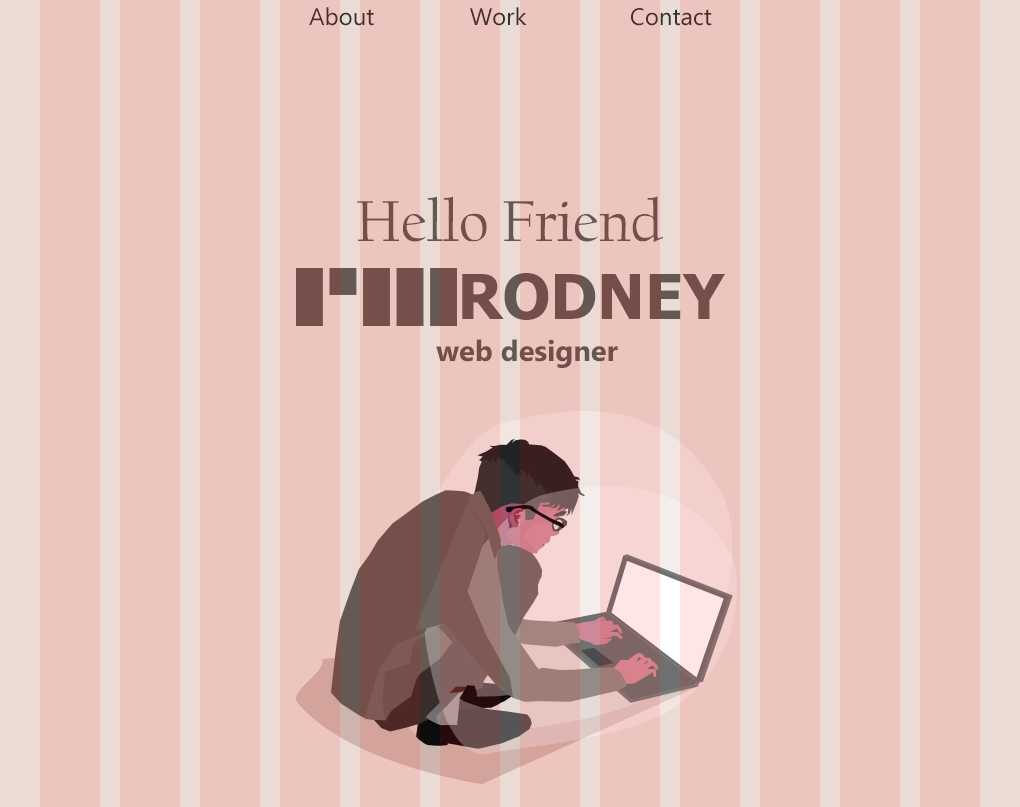
<style>
.page{position:relative;width:1020px;height:807px;background:#edc5bf}
.page>*{position:absolute;margin:0}
.t1{font:24px "Ebrima";color:#303333}
.t2{font:60px "CalifornianFB-Reg";color:#655752}
.t3{font:62px "Tahoma-Bold";color:#655752}
.t4{font:29px "Ebrima-Bold";color:#655752}
</style>
<div class="page">
<p class="t1" style="left:309px;top:7px;width:403px;height:19px">About          Work       Contact</p>
<p class="t2" style="left:357px;top:196px;width:306px;height:46px">Hello Friend</p>
<p class="t3" style="left:462px;top:273px;width:263px;height:47px">RODNEY</p>
<p class="t4" style="left:436px;top:339px;width:182px;height:29px">web designer</p>
</div>
